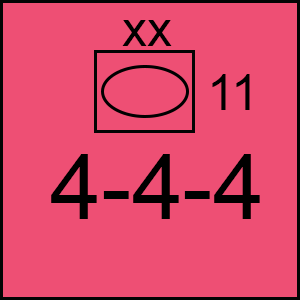
<style>
.page{position:relative;width:300px;height:300px;background:#ee4f74}
.page>*{position:absolute;margin:0}
.t1{font:50px "ArialMT";color:#000000}
.t2{font:91.7px "ArialMT";color:#000000}
</style>
<div class="page">
<p class="t1" style="left:122px;top:20px;width:50px;height:26px">xx</p>
<p class="t1" style="left:212px;top:74px;width:38px;height:36px">11</p>
<p class="t2" style="left:51px;top:154px;width:209px;height:65px">4-4-4</p>
</div>
